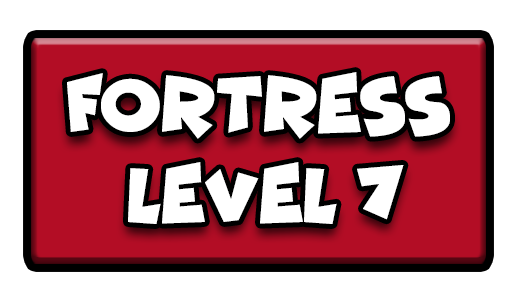
<style>
.page{position:relative;width:517px;height:301px;background:#ffffff}
.page>*{position:absolute;margin:0}
.t1{font:77.7px "Funhouse";color:#ffffff;scale:0.95 1}
</style>
<div class="page">
<p class="t1" style="left:67px;top:72px;width:383px;height:67px">FORTRESS</p>
<p class="t1" style="left:128px;top:162px;width:276px;height:62px">LEVEL 7</p>
</div>
